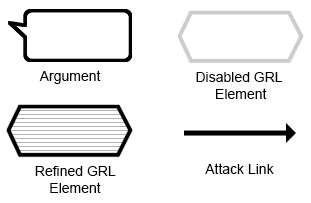
<style>
.page{position:relative;width:311px;height:203px;background:#ffffff}
.page>*{position:absolute;margin:0}
.t1{font:14px "ArialMT";color:#000000}
</style>
<div class="page">
<p class="t1" style="left:39px;top:70px;width:62px;height:14px">Argument</p>
<p class="t1" style="left:196px;top:72px;width:87px;height:27px;text-align:center">Disabled GRL <br>Element</p>
<p class="t1" style="left:35px;top:166px;width:81px;height:27px;text-align:center">Refined GRL<br>Element</p>
<p class="t1" style="left:205px;top:163px;width:69px;height:11px">Attack Link</p>
</div>
